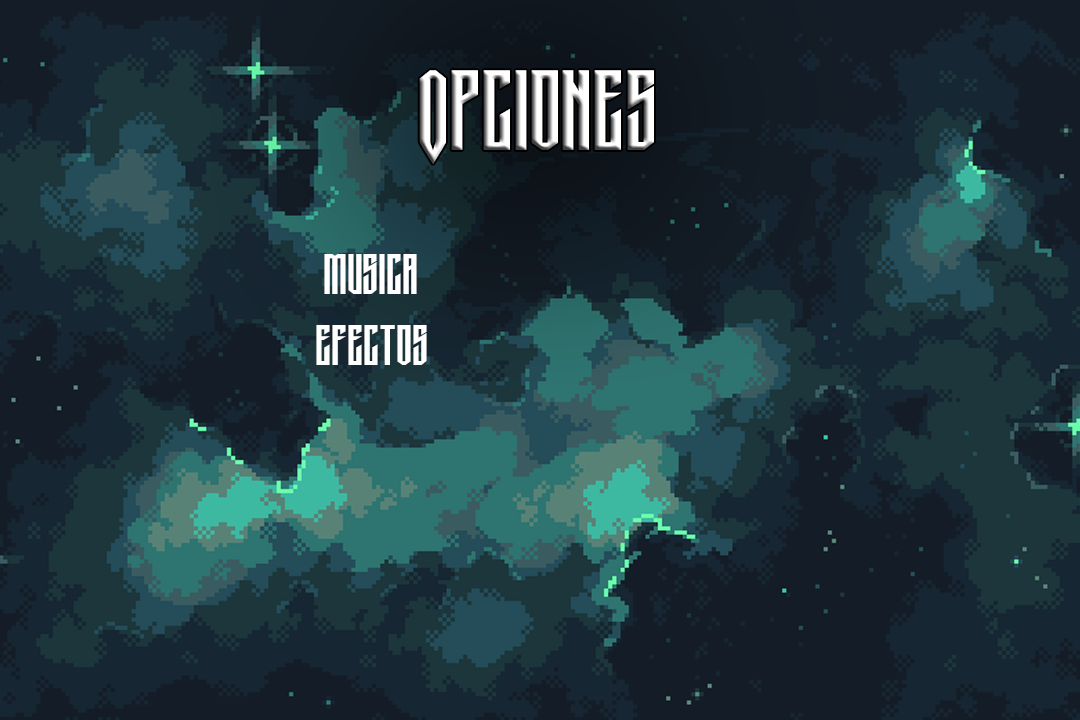
<style>
.page{position:relative;width:1080px;height:720px}
.page>*{position:absolute;margin:0}
.t1{font:80px "GamerockPersonalUse"}
.t2{font:40px "GamerockPersonalUse";color:#ffffff}
</style>
<div class="page">
<p class="t1" style="left:419px;top:70px;width:235px;height:94px">Opciones</p>
<p class="t2" style="left:324px;top:254px;width:93px;height:40px">musica</p>
<p class="t2" style="left:316px;top:325px;width:111px;height:40px">efectos</p>
</div>
